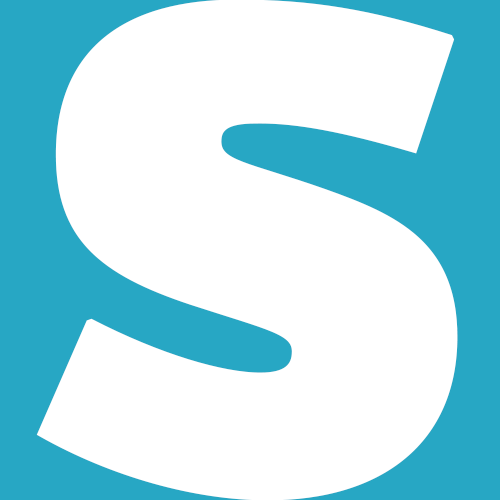
<style>
.page{position:relative;width:500px;height:500px;background:#ffffff}
.page>*{position:absolute;margin:0}
.t1{font:786.1px "Gentona-ExtraBoldDEMO";color:#ffffff;font-weight:bold}
</style>
<div class="page">
<p class="t1" style="left:36px;top:0px;width:422px;height:501px">S</p>
</div>
